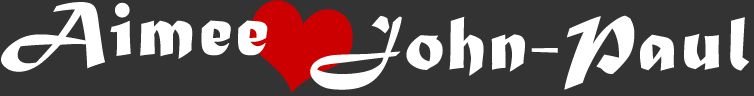
<style>
.page{position:relative;width:754px;height:96px;background:#333333}
.page>*{position:absolute;margin:0}
.t1{font:80px "MaturaMTScriptCapitals";letter-spacing:0.04em;color:#ffffff}
</style>
<div class="page">
<p class="t1" style="left:1px;top:2px;width:267px;height:70px">Aimee</p>
<p class="t1" style="left:310px;top:15px;width:439px;height:75px">John-Paul</p>
</div>
